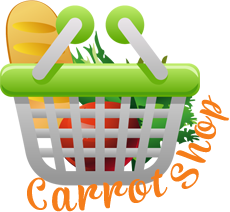
<style>
.page{position:relative;width:230px;height:212px;background:#ffffff}
.page>*{position:absolute;margin:0}
.t1{font:37.3px "SVN-Monday";letter-spacing:0.075em;color:#f57d1a;scale:1.32 1}
.t2{font:34.2px "SVN-Monday";letter-spacing:0.075em;color:#f57d1a;scale:1.32 1}
.t3{font:40.7px "SVN-Monday";letter-spacing:0.075em;color:#f57d1a;scale:1.29 1}
</style>
<div class="page">
<p class="t1" style="left:170px;top:94px;width:59px;height:95px;rotate:-72deg">Sho<span class="t2">p</span></p>
<p class="t3" style="left:27px;top:169px;width:141px;height:43px;rotate:-6deg">Carrot</p>
</div>
